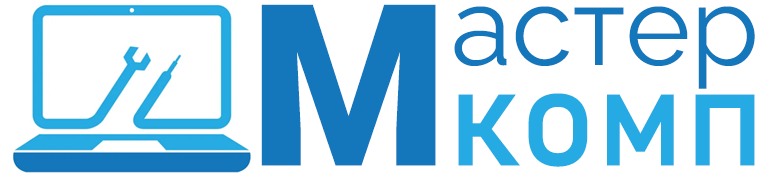
<style>
.page{position:relative;width:771px;height:178px;background:#ffffff}
.page>*{position:absolute;margin:0}
.t1{font:140px "Bahnschrift";color:#26aae4}
.t2{font:226px "Roboto-Black";color:#1476bb}
.t3{font:111px "Raleway-Regular";color:#1476bb}
</style>
<div class="page">
<p class="t1" style="left:261px;top:4px;width:494px;height:163px"><span class="t2">M</span>комп</p>
<p class="t3" style="left:454px;top:6px;width:301px;height:83px">астер</p>
</div>
